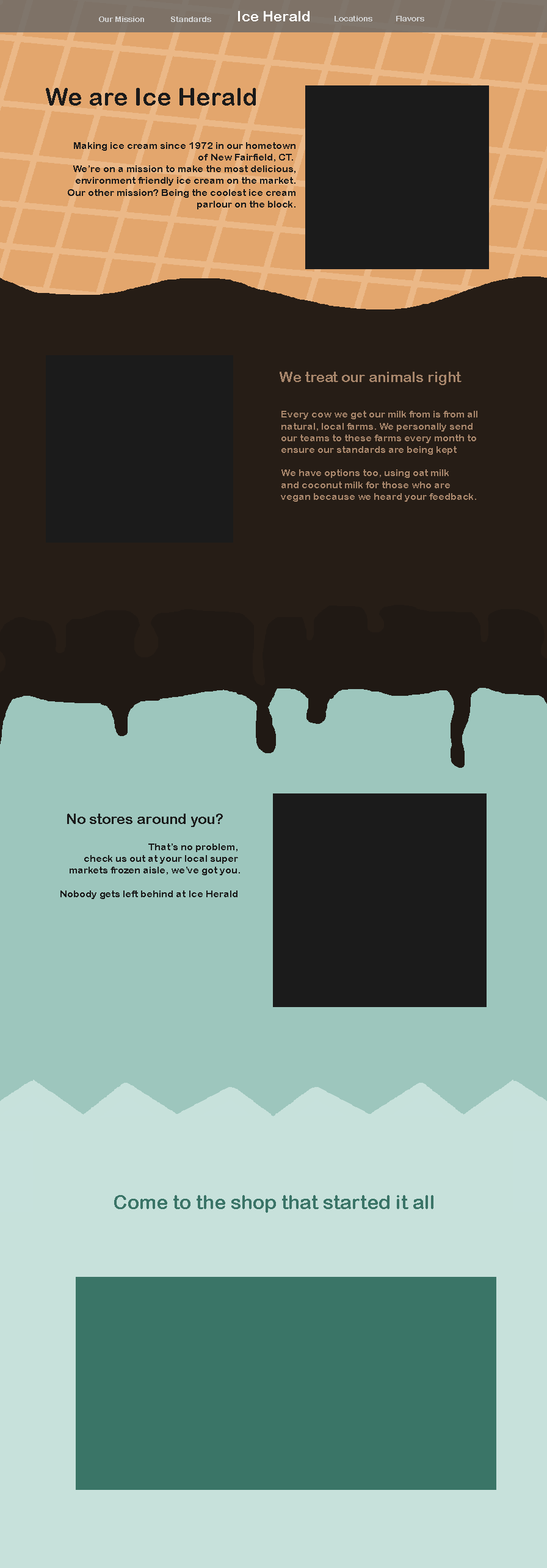
<style>
.page{position:relative;width:547px;height:1568px}
.page>*{position:absolute;margin:0}
.t1{font:8.1px "ArialRoundedMTBold";color:#d3d3d3}
.t2{font:14.6px "ArialRoundedMTBold";color:#ffffff}
.t3{font:24.4px "ArialRoundedMTBold";color:#1a1a1a}
.t4{font:9.8px "ArialRoundedMTBold";color:#1a1a1a}
.t5{font:14.6px "ArialRoundedMTBold";color:#a9876c}
.t6{font:9.8px "ArialRoundedMTBold";color:#a9876c}
.t7{font:14.6px "ArialRoundedMTBold";color:#1b1b1b}
.t8{font:9.8px "ArialRoundedMTBold";color:#1b1b1b}
</style>
<div class="page">
<p class="t1" style="left:99px;top:16px;width:112px;height:6px">Our Mission              Standards</p>
<p class="t2" style="left:238px;top:11px;width:71px;height:10px">Ice Herald</p>
<p class="t1" style="left:334px;top:16px;width:38px;height:5px">Locations</p>
<p class="t1" style="left:396px;top:16px;width:28px;height:5px">Flavors</p>
<p class="t3" style="left:46px;top:88px;width:210px;height:18px">We are Ice Herald</p>
<p class="t4" style="left:68px;top:142px;width:227px;height:67px;text-align:right">Making ice cream since 1972 in our hometown<br>of New Fairfield, CT. <br>We’re on a mission to make the most delicious,<br>environment friendly ice cream on the market.<br>Our other mission? Being the coolest ice cream<br>parlour on the block.</p>
<p class="t5" style="left:280px;top:372px;width:181px;height:13px">We treat our animals right</p>
<p class="t6" style="left:281px;top:411px;width:196px;height:91px">Every cow we get our milk from is from all<br>natural, local farms. We personally send<br>our teams to these farms every month to<br>ensure our standards are being kept<br><br>We have options too, using oat milk <br>and coconut milk for those who are<br>vegan because we heard your feedback.</p>
<p class="t7" style="left:67px;top:814px;width:156px;height:13px">No stores around you?</p>
<p class="t8" style="left:60px;top:844px;width:180px;height:55px;text-align:right">That’s no problem, <br>check us out at your local super <br>markets frozen aisle, we’ve got you.<br><br>Nobody gets left behind at Ice Herald</p>
</div>
